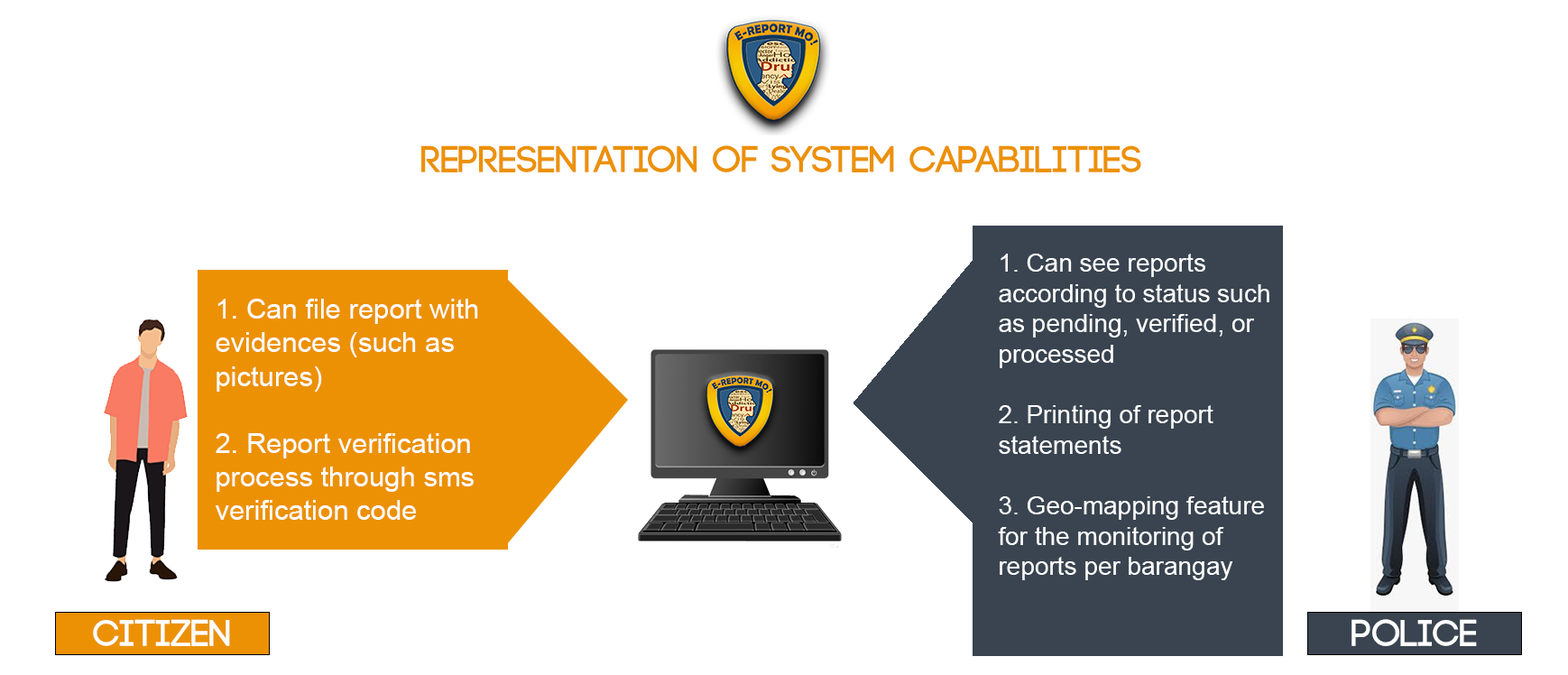
<style>
.page{position:relative;width:1568px;height:675px;background:#ffffff}
.page>*{position:absolute;margin:0}
.t1{font:37.9px "Code-Bold";color:#ec9103}
.t2{font:25.3px "ArialMT";color:#ffffff}
.t3{font:28px "ArialMT";color:#ffffff}
.t4{font:37.9px "Code-Bold";color:#ffffff}
</style>
<div class="page">
<p class="t1" style="left:421px;top:145px;width:720px;height:27px">REPRESENTATION OF SYSTEM CAPABILITIES</p>
<p class="t2" style="left:998px;top:254px;width:271px;height:326px">1. Can see reports according to status such as pending, verified, or processed<br><br>2. Printing of report statements<br><br>3. Geo-mapping feature for the monitoring of reports per barangay</p>
<p class="t3" style="left:216px;top:299px;width:262px;height:221px">1. Can file report with evidences (such as pictures)<br><br>2. Report verification process through sms verification code</p>
<p class="t4" style="left:93px;top:619px;width:137px;height:27px">CITIZEN</p>
<p class="t4" style="left:1351px;top:619px;width:126px;height:27px">POLICE</p>
</div>
